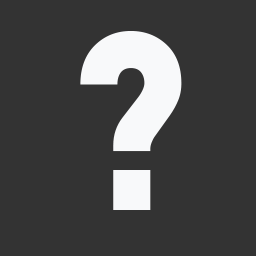
<style>
.page{position:relative;width:256px;height:256px;background:#333333}
.page>*{position:absolute;margin:0}
.t1{font:250px "DIN-Black";color:#f8f9fa;scale:0.9 1}
</style>
<div class="page">
<p class="t1" style="left:80px;top:31px;width:102px;height:179px">?</p>
</div>
